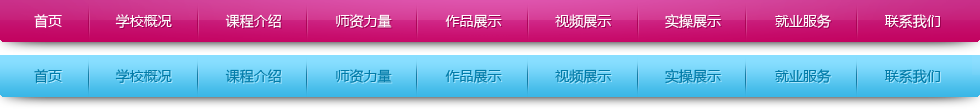
<style>
.page{position:relative;width:980px;height:110px}
.page>*{position:absolute;margin:0}
.t1{font:14px "MicrosoftYaHei";color:#ffffff}
.t2{font:14px "MicrosoftYaHei";color:#027ba8}
</style>
<div class="page">
<p class="t1" style="left:34px;top:14px;width:906px;height:15px">首页             学校概况             课程介绍             师资力量             作品展示             视频展示             实操展示             就业服务             联系我们</p>
<p class="t2" style="left:34px;top:69px;width:906px;height:15px">首页             学校概况             课程介绍             师资力量             作品展示             视频展示             实操展示             就业服务             联系我们</p>
</div>
